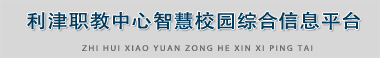
<style>
.page{position:relative;width:380px;height:58px;background:#d7d7d7}
.page>*{position:absolute;margin:0}
.t1{font:18.7px "AdobeHeitiStd-Regular";letter-spacing:0.014em;color:#013a5a;scale:1.1 1}
.t2{font:8.1px "MyriadPro-Regular";letter-spacing:0.174em;color:#676869;scale:1.1 1}
</style>
<div class="page">
<p class="t1" style="left:27px;top:11px;width:334px;height:19px">利津职教中心智慧校园综合信息平台</p>
<p class="t2" style="left:82px;top:45px;width:231px;height:6px">ZHI HUI XIAO YUAN ZONG HE XIN XI PING TAI</p>
</div>
